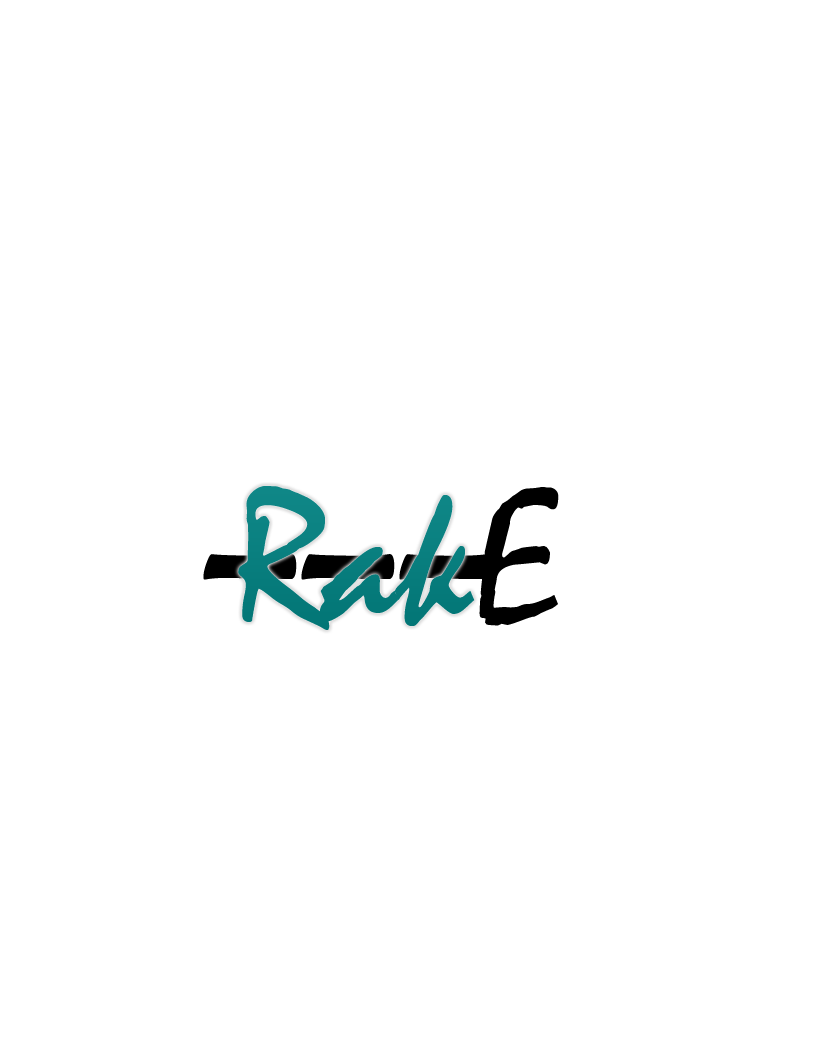
<style>
.page{position:relative;width:816px;height:1056px;background:#ffffff}
.page>*{position:absolute;margin:0}
.t1{font:195.9px "Mistral";color:#0f8787}
.t2{font:195.9px "Mistral";color:#000000}
.t3{font:438.8px "Mistral";scale:0.45 1}
</style>
<div class="page">
<p class="t1" style="left:238px;top:486px;width:237px;height:144px">Rak</p>
<p class="t2" style="left:479px;top:487px;width:80px;height:139px">E</p>
<p class="t3" style="left:203px;top:554px;width:290px;height:26px">___</p>
</div>
